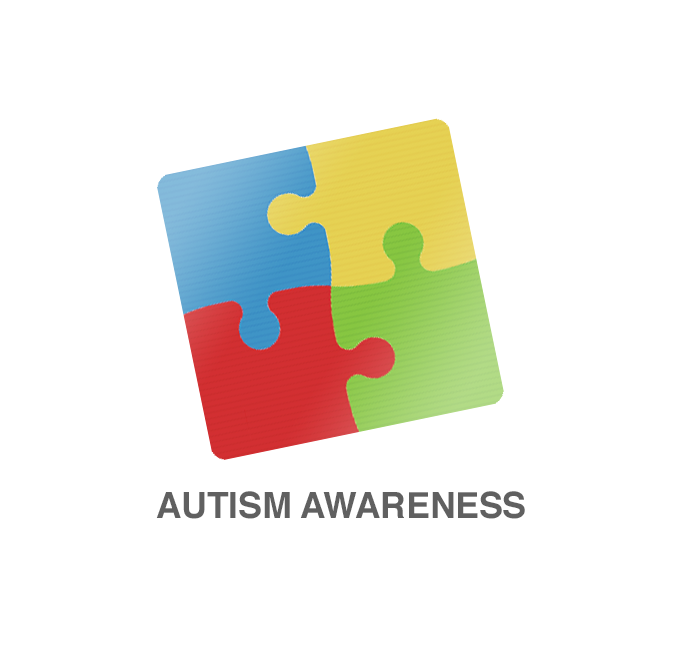
<style>
.page{position:relative;width:683px;height:655px;background:#ffffff}
.page>*{position:absolute;margin:0}
.t1{font:36px "Helvetica-Bold";letter-spacing:-0.005em;color:#606060;text-transform:uppercase}
</style>
<div class="page">
<p class="t1" style="left:156px;top:491px;width:369px;height:28px">Autism awareness</p>
</div>
